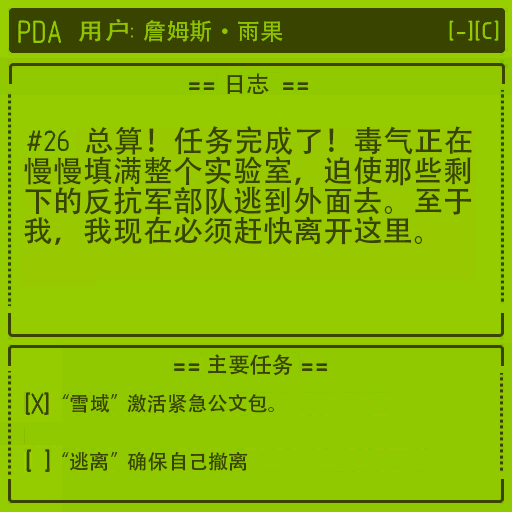
<style>
.page{position:relative;width:512px;height:512px;background:#90c900}
.page>*{position:absolute;margin:0}
.t1{font:30px/30px "AdobeHeitiStd-Regular";color:#384400}
</style>
<div class="page">
<p class="t1" style="left:24px;top:126px;width:448px;height:119px">总算！任务完成了！毒气正在<br>慢慢填满整个实验室，迫使那些剩<br>下的反抗军部队逃到外面去。至于<br>我，我现在必须赶快离开这里。</p>
</div>
